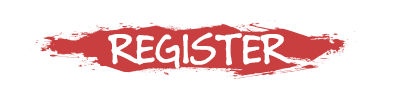
<style>
.page{position:relative;width:400px;height:100px;background:#ffffff}
.page>*{position:absolute;margin:0}
.t1{font:48px "BuxtonSketch";letter-spacing:-0.01em;color:#ffffff}
</style>
<div class="page">
<p class="t1" style="left:108px;top:32px;width:183px;height:37px">REGISTER</p>
</div>
